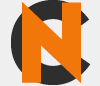
<style>
.page{position:relative;width:100px;height:86px;background:#efefef}
.page>*{position:absolute;margin:0}
.t1{font:141.7px "NovaSOLID-SOLID";letter-spacing:0.01em}
.t2{font:141.7px "NovaSOLID-SOLID";letter-spacing:0.01em;color:#f2770a}
</style>
<div class="page">
<p class="t1" style="left:11px;top:0px;width:80px;height:85px">C</p>
<p class="t2" style="left:22px;top:2px;width:59px;height:81px">N</p>
</div>
